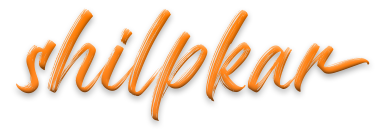
<style>
.page{position:relative;width:387px;height:130px;background:#ffffff}
.page>*{position:absolute;margin:0}
.t1{font:101px "MandoulBrushPERSONALUSEONLY-Regular"}
</style>
<div class="page">
<p class="t1" style="left:16px;top:8px;width:354px;height:113px">shilpkar</p>
</div>
